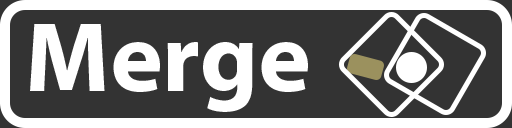
<style>
.page{position:relative;width:512px;height:128px;background:#333333}
.page>*{position:absolute;margin:0}
.t1{font:100px "MyriadPro-Bold";color:#ffffff}
</style>
<div class="page">
<p class="t1" style="left:30px;top:24px;width:278px;height:88px">Merge</p>
</div>
